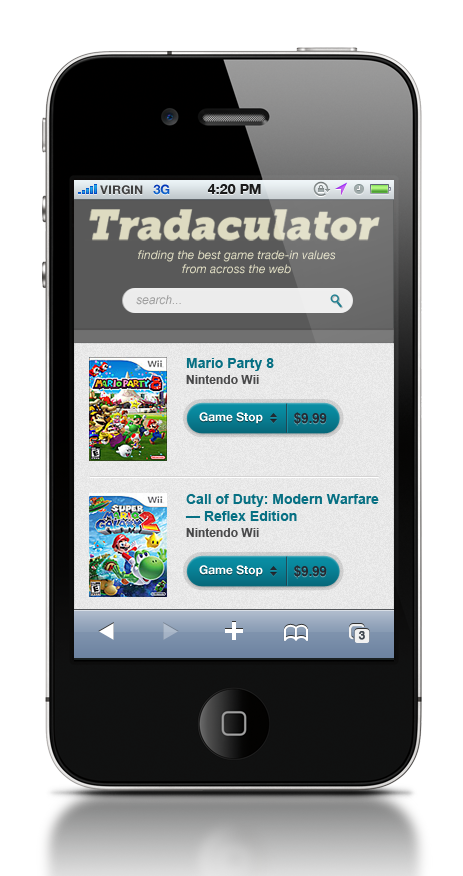
<style>
.page{position:relative;width:463px;height:876px;background:#ffffff}
.page>*{position:absolute;margin:0}
.t1{font:12px "HelveticaNeue-Bold";color:#404040;text-transform:uppercase}
.t2{font:13px "HelveticaNeue-Bold";color:#0c54c5;text-transform:uppercase}
.t3{font:14px "HelveticaNeue-Bold";color:#1a1b1b;text-transform:uppercase}
.t4{font:12px/14px "HelveticaNeue-Italic";color:#dedbc1}
.t5{font:12px "Arial-ItalicMT";color:#9c9c9c}
.t6{font:14px "Arial-BoldMT";color:#077083}
.t7{font:12px "Arial-BoldMT";color:#49494a}
.t8{font:12px "HelveticaNeue-Bold";color:#ffffff}
.t9{font:13.8px "Arial-BoldMT";letter-spacing:-0.025em;color:#252a32;text-transform:uppercase}
.t10{font:11px "HelveticaNeue";color:#40474f;font-weight:bold}
</style>
<div class="page">
<p class="t1" style="left:100px;top:185px;width:43px;height:10px">VIRGIN</p>
<p class="t2" style="left:153px;top:184px;width:17px;height:11px">3G</p>
<p class="t3" style="left:207px;top:184px;width:54px;height:10px">4:20 PM</p>
<p class="t4" style="left:138px;top:250px;width:198px;height:24px;text-align:center">finding the best game trade-in values <br>from across the web</p>
<p class="t5" style="left:136px;top:295px;width:45px;height:10px">search...</p>
<p class="t6" style="left:186px;top:358px;width:88px;height:26px">Mario Party 8<br><span class="t7">Nintendo Wii</span></p>
<p class="t8" style="left:199px;top:412px;width:64px;height:12px">Game Stop</p>
<p class="t9" style="left:294px;top:412px;width:33px;height:13px">$9.99</p>
<p class="t6" style="left:185px;top:494px;width:194px;height:43px">Call of Duty: Modern Warfare — Reflex Edition<br><span class="t7">Nintendo Wii</span></p>
<p class="t8" style="left:199px;top:565px;width:64px;height:12px">Game Stop</p>
<p class="t9" style="left:294px;top:565px;width:33px;height:13px">$9.99</p>
<p class="t10" style="left:358px;top:631px;width:7px;height:9px">3</p>
</div>
